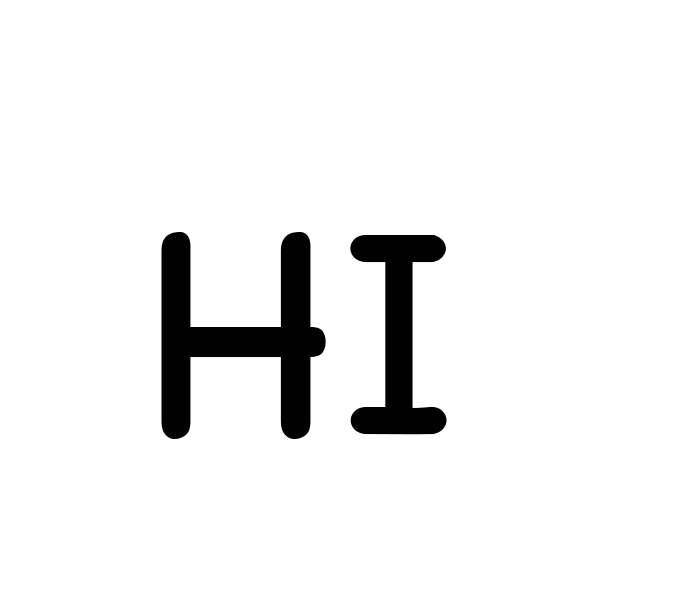
<style>
.page{position:relative;width:674px;height:606px;background:#ffffff}
.page>*{position:absolute;margin:0}
.t1{font:300px "Chalkboard";color:#010101}
</style>
<div class="page">
<p class="t1" style="left:161px;top:232px;width:286px;height:207px">HI</p>
</div>
